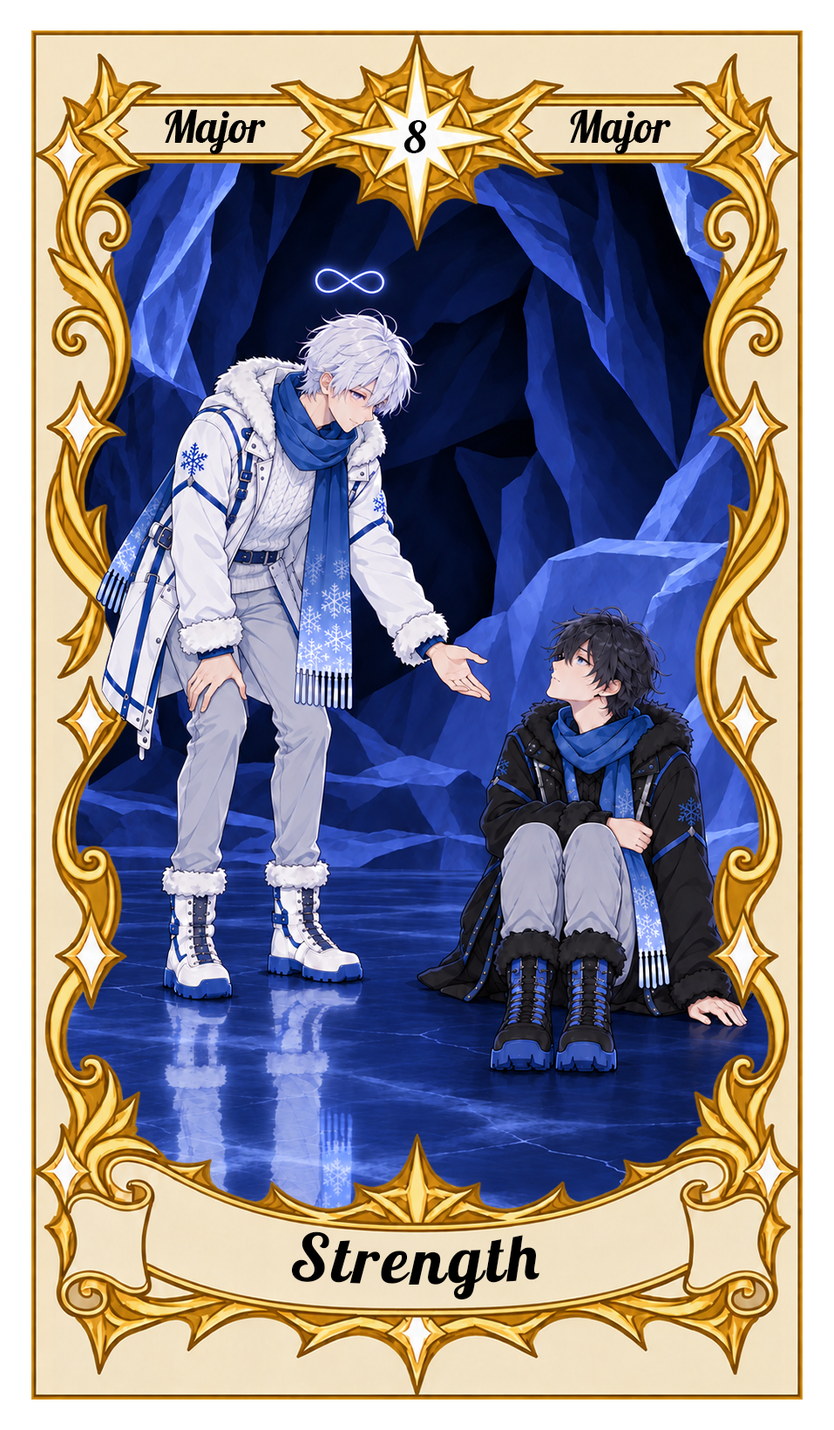
<style>
.page{position:relative;width:834px;height:1430px}
.page>*{position:absolute;margin:0}
.t1{font:43.6px "Lobster-Regular";color:#000000}
.t2{font:65.3px "Lobster-Regular";letter-spacing:0.05em;color:#000000}
</style>
<div class="page">
<p class="t1" style="left:165px;top:110px;width:101px;height:44px">Major</p>
<p class="t1" style="left:570px;top:110px;width:101px;height:44px">Major</p>
<p class="t1" style="left:403px;top:120px;width:24px;height:33px">8</p>
<p class="t2" style="left:291px;top:1232px;width:248px;height:69px">Strength</p>
</div>
